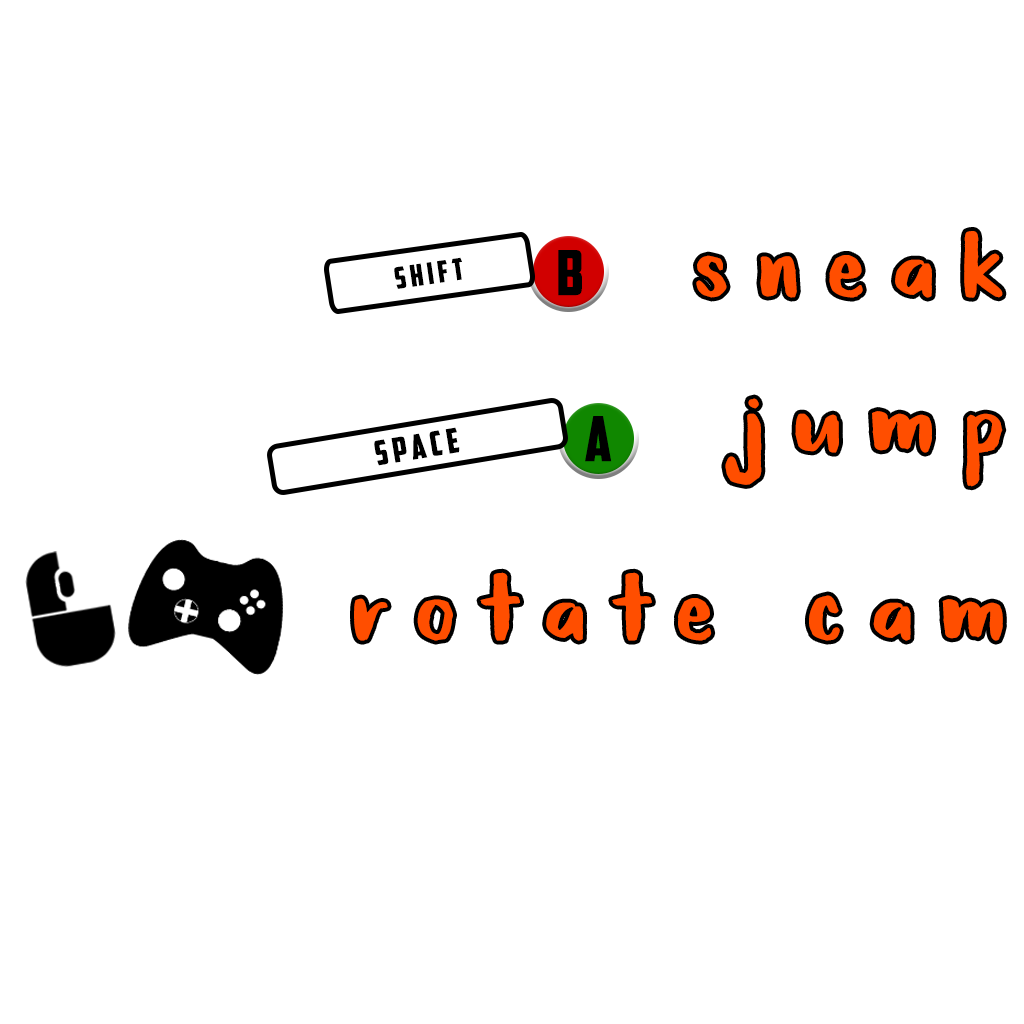
<style>
.page{position:relative;width:1024px;height:1024px;background:#ffffff}
.page>*{position:absolute;margin:0}
.t1{font:164.4px "BabyFox";letter-spacing:0.15em;color:#ff4e00}
.t2{font:29.7px "AmericanCaptain";letter-spacing:0.15em;color:#000000}
.t3{font:61.9px "AmericanCaptain";letter-spacing:0.15em;color:#000000}
.t4{font:33.8px "AmericanCaptain";letter-spacing:0.15em;color:#000000}
</style>
<div class="page">
<p class="t1" style="left:696px;top:231px;width:307px;height:67px">sneak</p>
<p class="t2" style="left:394px;top:257px;width:68px;height:32px;rotate:-8deg">Shift</p>
<p class="t3" style="left:558px;top:250px;width:24px;height:46px">b</p>
<p class="t1" style="left:725px;top:398px;width:278px;height:89px">Jump</p>
<p class="t3" style="left:585px;top:416px;width:27px;height:46px">A</p>
<p class="t4" style="left:374px;top:427px;width:86px;height:39px;rotate:-9deg">space</p>
<p class="t1" style="left:354px;top:572px;width:649px;height:69px">Rotate cam</p>
</div>
